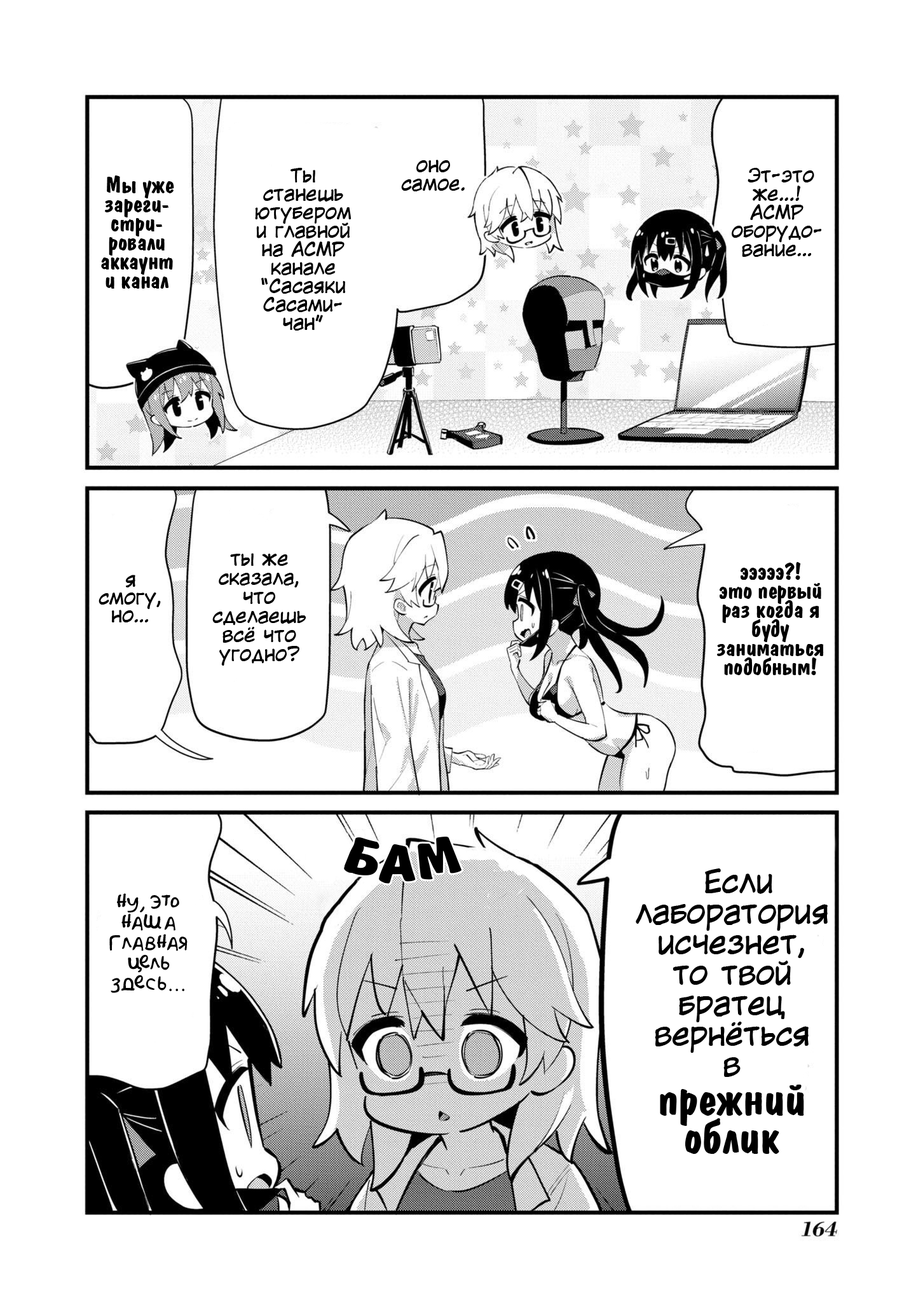
<style>
.page{position:relative;width:916px;height:1302px;background:#ffffff}
.page>*{position:absolute;margin:0}
.t1{font:19.1px/18.4px "KuraiVoice2";color:#000000}
.t2{font:22.9px/19.1px "ADomInoBold";color:#000000}
.t3{font:19.1px/19.1px "KuraiVoice2";color:#000000}
.t4{font:19.1px/17.8px "KuraiVoice2";color:#000000}
.t5{font:50.9px "ADomInoBold";color:#000000}
.t6{font:30.5px/30.5px "KuraiVoice2";color:#000000}
.t7{font:45.8px/38.1px "ADomInoBold";color:#000000}
.t8{font:19.1px/20.3px "AkbarPlain";color:#000000}
.t9{font:19.1px/20.3px "MyriadPro-Regular";color:#000000}
</style>
<div class="page">
<p class="t1" style="left:401px;top:160px;width:64px;height:31px;text-align:center">оно<br>самое.</p>
<p class="t1" style="left:255px;top:168px;width:96px;height:163px;text-align:center">Ты<br>станешь ютубером<br>и главной <br>на АСМР<br>канале <br>“Сасаяки Сасами-<br>чан”</p>
<p class="t1" style="left:732px;top:168px;width:89px;height:89px;text-align:center">Эт-это<br>же...!<br>АСМР оборудо-<br>вание…</p>
<p class="t2" style="left:101px;top:175px;width:73px;height:114px;text-align:center">Мы уже зареги-<br>стри-<br>ровали<br>аккаунт<br>и канал</p>
<p class="t3" style="left:212px;top:553px;width:94px;height:113px;text-align:center">ты же сказала, что сделаешь всё что угодно?</p>
<p class="t2" style="left:717px;top:562px;width:107px;height:113px;text-align:center">эээээ?!<br>это первый раз когда я буду заниматься подобным!</p>
<p class="t4" style="left:99px;top:575px;width:62px;height:47px;text-align:center">я<br>смогу,<br>но…</p>
<p class="t5" style="left:344px;top:837px;width:117px;height:47px;rotate:6deg">БАМ</p>
<p class="t6" style="left:636px;top:868px;width:192px;height:286px;text-align:center">Если<br>лаборатория исчезнет,<br>то твой<br>братец<br>вернёться<br>в<br><span class="t7">прежний<br>облик</span></p>
<p class="t8" style="left:109px;top:893px;width:79px;height:100px;text-align:center">ну, это наша главная цель здесь<span class="t9">…</span></p>
</div>
